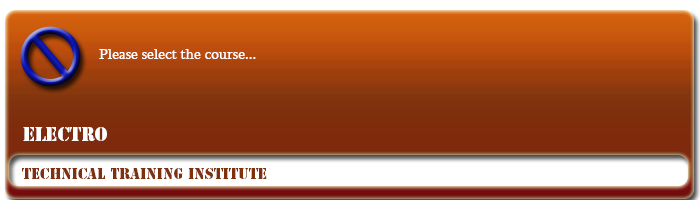
<style>
.page{position:relative;width:700px;height:200px}
.page>*{position:absolute;margin:0}
.t1{font:15px "Sylfaen";color:#ffffff}
.t2{font:18px "StencilStd";color:#ffffff}
.t3{font:14px "StencilStd";color:#7f300d}
</style>
<div class="page">
<p class="t1" style="left:99px;top:49px;width:157px;height:10px">Please select the course...</p>
<p class="t2" style="left:23px;top:127px;width:84px;height:14px">ELECTRO</p>
<p class="t3" style="left:22px;top:168px;width:245px;height:11px">Technical Training Institute</p>
</div>
